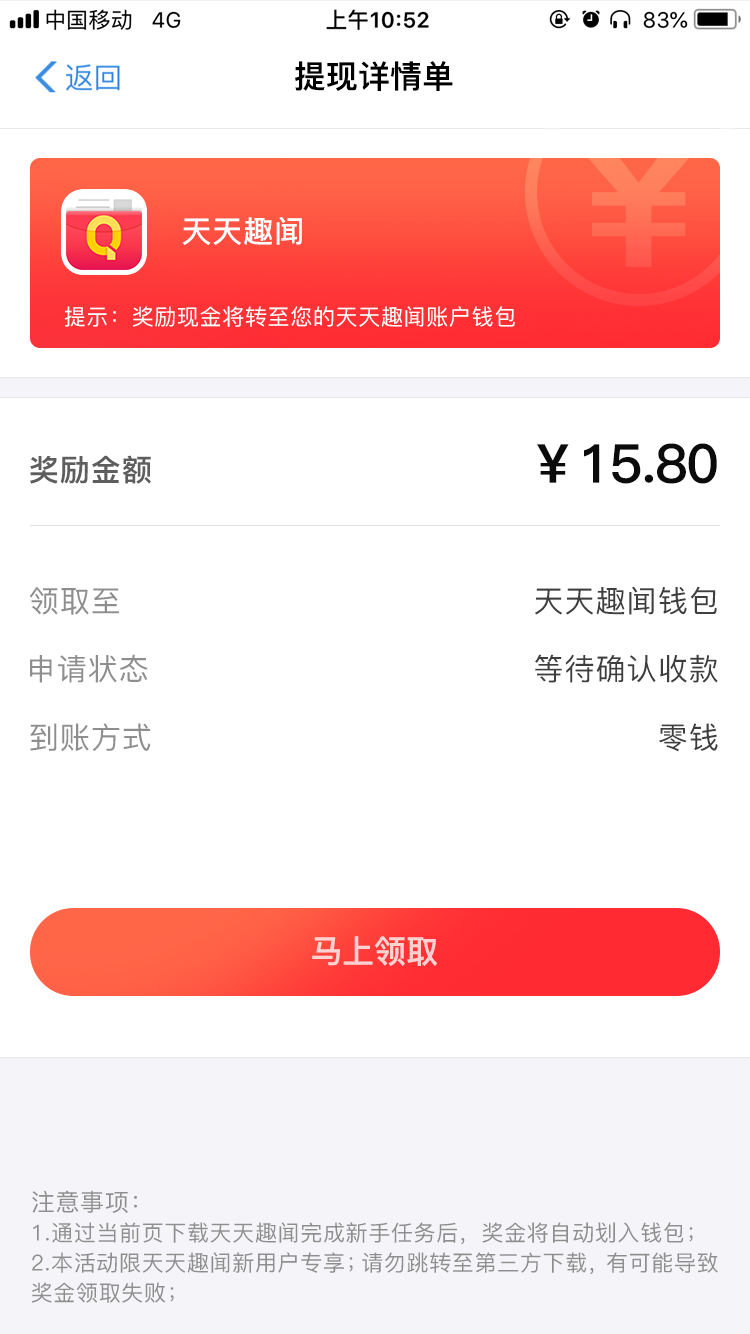
<style>
.page{position:relative;width:750px;height:1334px;background:#ffffff}
.page>*{position:absolute;margin:0}
.t1{font:32px "PingFang-SC-Heavy";color:#000000}
.t2{font:30px "PingFang-SC-Bold";letter-spacing:0.03em;color:#ffffff}
.t3{font:22px "PingFang-SC-Medium";letter-spacing:0.03em;color:#ffffff}
.t4{font:54px "PingFang-SC-Heavy";letter-spacing:-0.02em;color:#0b0b0c}
.t5{font:30.1px "PingFang-SC-Heavy";letter-spacing:0.03em;color:#5e5e5e}
.t6{font:30.1px "PingFang-SC-Medium";letter-spacing:0.03em;color:#8e8e8e}
.t7{font:30.1px "PingFang-SC-Medium";letter-spacing:0.03em;color:#3e3e3e}
.t8{font:32px "PingFang-SC-Heavy";color:#ffd1d1}
.t9{font:22px/30px "PingFang-SC-Medium";letter-spacing:0.03em;color:#8e8e8e}
.t10{font:24px/30px "PingFang-SC-Medium";letter-spacing:0.03em;color:#8e8e8e}
.t11{font:22px/30px "PingFang-SC-Medium";letter-spacing:-0.29em;color:#8e8e8e}
.t12{font:22px/30px "PingFang-SC-Medium";letter-spacing:-0.17em;color:#8e8e8e}
</style>
<div class="page">
<p class="t1" style="left:295px;top:61px;width:158px;height:30px">提现详情单</p>
<p class="t2" style="left:182px;top:217px;width:120px;height:28px">天天趣闻</p>
<p class="t3" style="left:64px;top:306px;width:451px;height:21px">提示：奖励现金将转至您的天天趣闻账户钱包</p>
<p class="t4" style="left:537px;top:443px;width:180px;height:41px">￥15.80</p>
<p class="t5" style="left:30px;top:455px;width:121px;height:29px">奖励金额</p>
<p class="t6" style="left:29px;top:587px;width:90px;height:28px">领取至</p>
<p class="t7" style="left:535px;top:586px;width:182px;height:29px">天天趣闻钱包</p>
<p class="t6" style="left:30px;top:654px;width:118px;height:29px">申请状态</p>
<p class="t7" style="left:535px;top:654px;width:183px;height:29px">等待确认收款</p>
<p class="t6" style="left:30px;top:723px;width:121px;height:28px">到账方式</p>
<p class="t7" style="left:659px;top:723px;width:59px;height:29px">零钱</p>
<p class="t8" style="left:312px;top:936px;width:125px;height:30px">马上领取</p>
<p class="t9" style="left:31px;top:1190px;width:687px;height:113px"><span class="t10">注意事项：<br></span>1.通过当前页下载天天趣闻完成新手任务后，奖金将自动划入钱包；<br>2.本活动限天天趣闻新用户专享<span class="t11">；</span>请勿跳转至第三方下载<span class="t12">，</span>有可能导致<br>奖金领取失败；</p>
</div>
